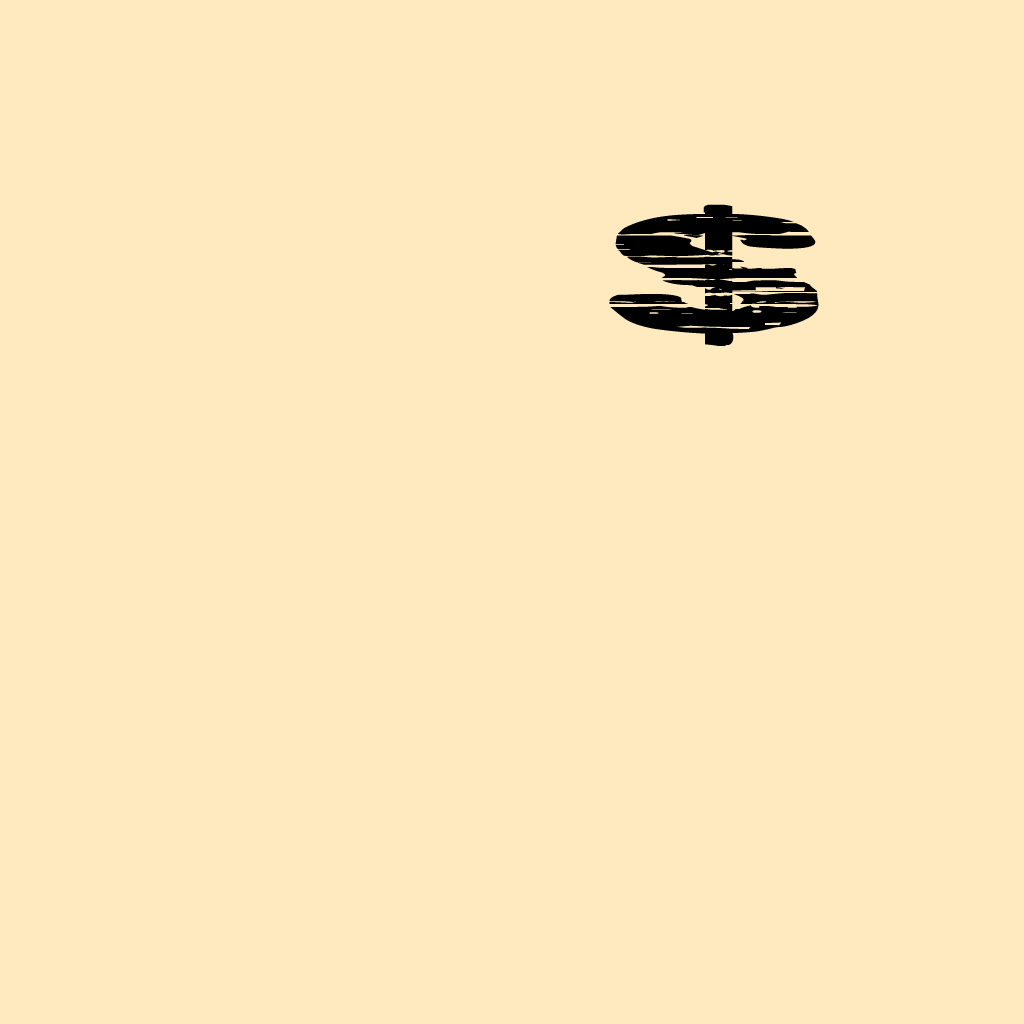
<style>
.page{position:relative;width:1024px;height:1024px;background:#feeabe}
.page>*{position:absolute;margin:0}
.t1{font:150px "CMWesternWoodblockNo2";color:#000000;scale:3.11 1}
</style>
<div class="page">
<p class="t1" style="left:609px;top:204px;width:210px;height:142px">$</p>
</div>
